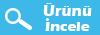
<style>
.page{position:relative;width:100px;height:35px;background:#3cb9e8}
.page>*{position:absolute;margin:0}
.t1{font:15.7px "ErasITC-Bold";color:#ffffff}
.t2{font:14.4px "ErasITC-Bold";color:#ffffff}
</style>
<div class="page">
<p class="t1" style="left:43px;top:3px;width:49px;height:13px">Ürünü</p>
<p class="t2" style="left:45px;top:22px;width:45px;height:9px">Incele</p>
</div>
